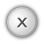
<style>
.page{position:relative;width:44px;height:44px;background:#ffffff}
.page>*{position:absolute;margin:0}
.t1{font:12.8px "Futura-Medium";color:#373737;scale:1.41 1}
</style>
<div class="page">
<p class="t1" style="left:16px;top:17px;width:12px;height:11px">X</p>
</div>
